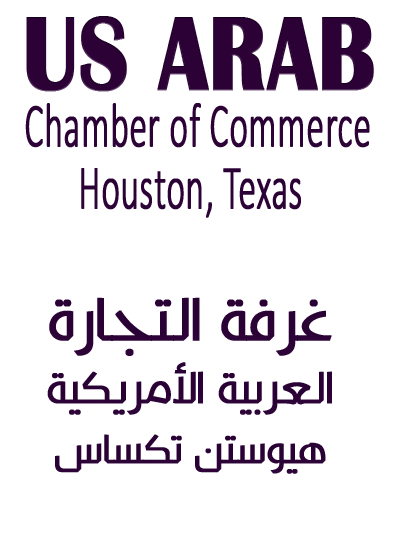
<style>
.page{position:relative;width:406px;height:536px;background:#ffffff}
.page>*{position:absolute;margin:0}
.t1{font:108px "BritannicBold";color:#2b0136;font-weight:bold;scale:0.82 1}
.t2{font:63px "Calibri-Light";color:#2b0136;font-weight:bold;scale:0.56 1}
.t3{font:43px/63px "KufyanArabic-Regular";color:#2b0136;font-weight:bold}
.t4{font:58px/66px "KufyanArabic-Regular";color:#2b0136;font-weight:bold}
.t5{font:39px/60px "KufyanArabic-Regular";color:#2b0136;font-weight:bold}
</style>
<div class="page">
<p class="t1" style="left:26px;top:16px;width:348px;height:76px">US ARAB</p>
<p class="t2" style="left:25px;top:103px;width:345px;height:45px">Chamber of Commerce</p>
<p class="t2" style="left:81px;top:168px;width:220px;height:50px">Houston, Texas</p>
<p class="t3" style="left:47px;top:297px;width:285px;height:177px;text-align:center"><span class="t4">غرفة التجارة<br></span>العربية الأمريكية<br><span class="t5">هيوستن تكساس</span></p>
</div>
